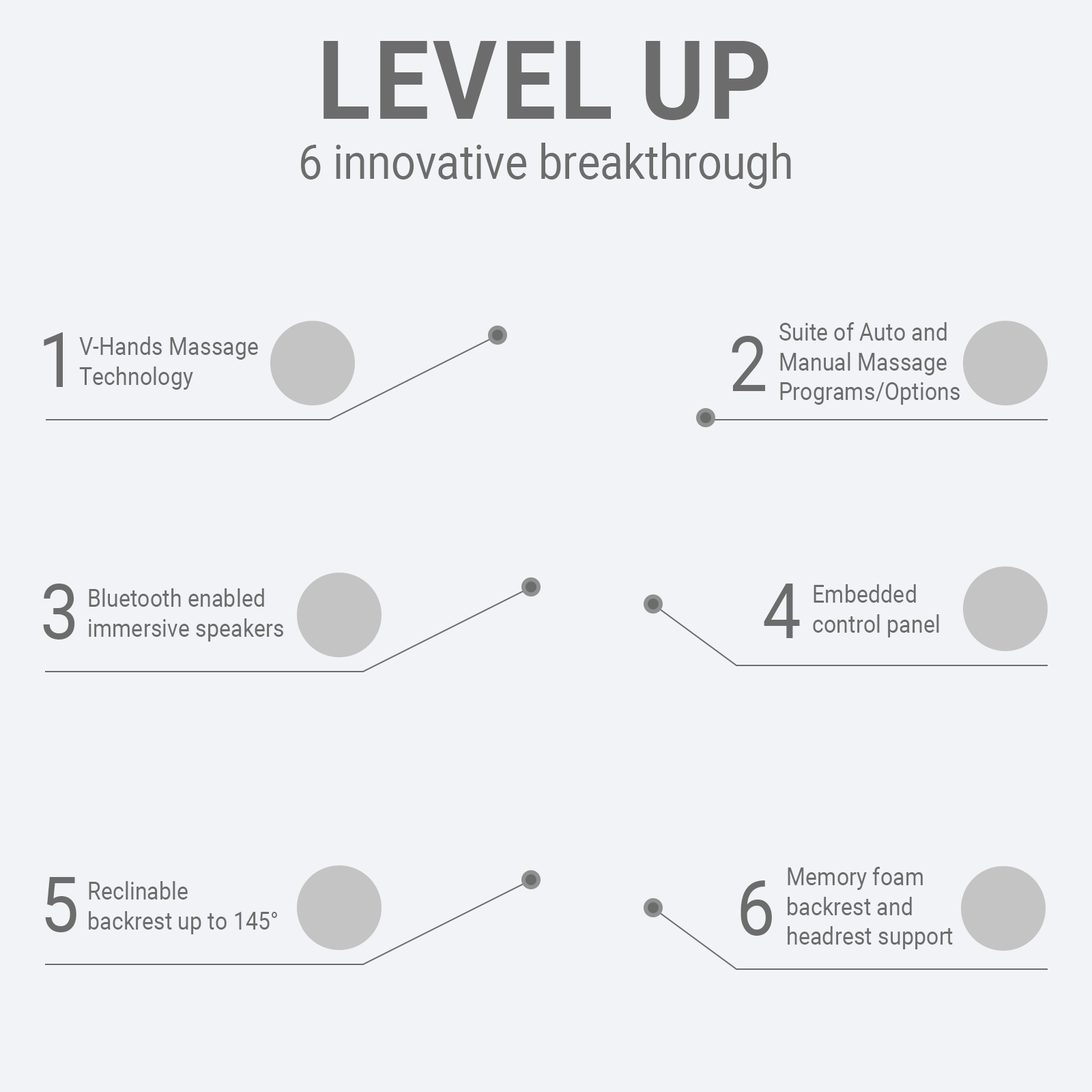
<style>
.page{position:relative;width:1092px;height:1092px;background:#f2f3f6}
.page>*{position:absolute;margin:0}
.t1{font:109.2px "Roboto-Bold";color:#6c6c6c;text-transform:uppercase;scale:0.9 1}
.t2{font:47.8px "Roboto-Regular";color:#6c6c6c;scale:0.9 1}
.t3{font:24.6px "Roboto-Regular";color:#6c6c6c;scale:0.9 1}
.t4{font:76.4px "Roboto-Regular";color:#6c6c6c;text-transform:uppercase;scale:0.9 1}
</style>
<div class="page">
<p class="t1" style="left:324px;top:41px;width:444px;height:79px">Level up</p>
<p class="t2" style="left:301px;top:143px;width:490px;height:46px">6 innovative breakthrough</p>
<p class="t3" style="left:779px;top:322px;width:181px;height:83px">Suite of Auto and<br>Manual Massage<br>Programs/Options</p>
<p class="t4" style="left:44px;top:332px;width:19px;height:55px">1</p>
<p class="t3" style="left:79px;top:336px;width:179px;height:54px">V-Hands Massage<br>Technology</p>
<p class="t4" style="left:732px;top:336px;width:34px;height:55px">2</p>
<p class="t4" style="left:43px;top:584px;width:32px;height:55px">3</p>
<p class="t3" style="left:89px;top:588px;width:194px;height:54px">Bluetooth enabled<br>immersive speakers</p>
<p class="t4" style="left:764px;top:584px;width:36px;height:54px">4</p>
<p class="t3" style="left:813px;top:584px;width:126px;height:53px">Embedded<br>control panel</p>
<p class="t3" style="left:788px;top:867px;width:165px;height:82px">Memory foam<br>backrest and<br>headrest support</p>
<p class="t4" style="left:45px;top:877px;width:31px;height:55px">5</p>
<p class="t3" style="left:89px;top:881px;width:188px;height:53px">Reclinable<br>backrest up to 145°</p>
<p class="t4" style="left:741px;top:880px;width:31px;height:56px">6</p>
</div>
